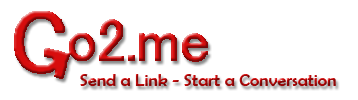
<style>
.page{position:relative;width:358px;height:100px;background:#ffffff}
.page>*{position:absolute;margin:0}
.t1{font:18px "BerlinSansFB-Reg"}
</style>
<div class="page">
<p class="t1" style="left:80px;top:74px;width:256px;height:12px">Send a Link - Start a Conversation</p>
</div>
